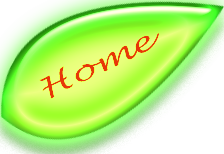
<style>
.page{position:relative;width:224px;height:154px}
.page>*{position:absolute;margin:0}
.t1{font:27.1px "LucidaHandwriting-Italic";color:#e8360a;scale:1.43 1}
</style>
<div class="page">
<p class="t1" style="left:39px;top:33px;width:121px;height:66px;rotate:-26deg">Home</p>
</div>
